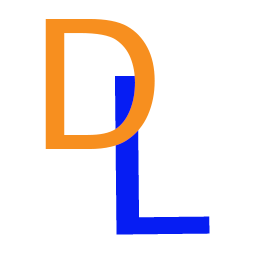
<style>
.page{position:relative;width:256px;height:256px;background:#ffffff}
.page>*{position:absolute;margin:0}
.t1{font:179.6px "LucidaSans";color:#f78f1f}
.t2{font:218.9px "LucidaSans";color:#061df3}
</style>
<div class="page">
<p class="t1" style="left:45px;top:19px;width:110px;height:130px">D</p>
<p class="t2" style="left:115px;top:75px;width:95px;height:160px;rotate:-1deg">L</p>
</div>
